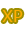
<style>
.page{position:relative;width:25px;height:32px;background:#ffffff}
.page>*{position:absolute;margin:0}
.t1{font:16px "Verdana";color:#ffae00}
</style>
<div class="page">
<p class="t1" style="left:2px;top:10px;width:21px;height:12px">XP</p>
</div>
